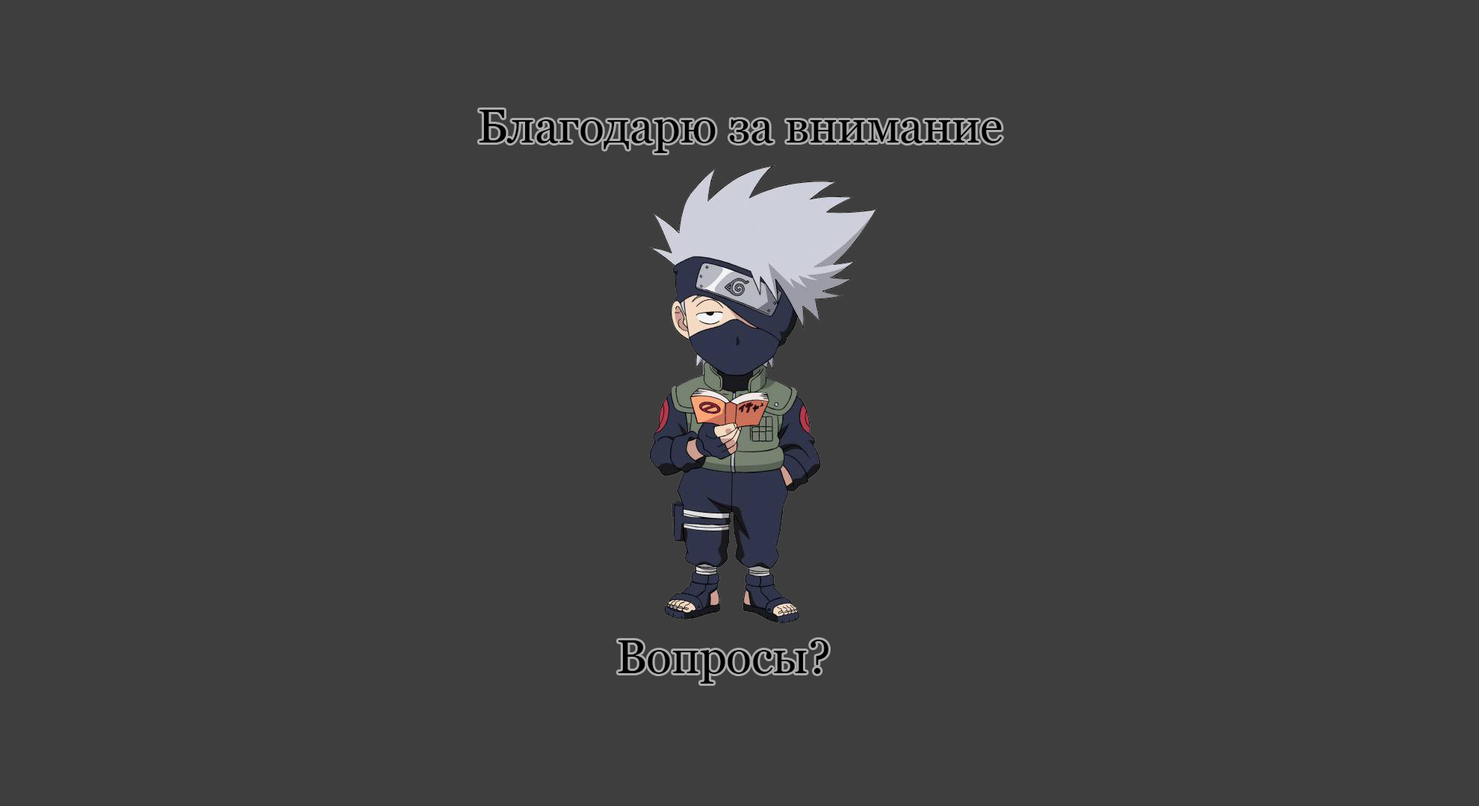
<style>
.page{position:relative;width:1479px;height:806px;background:#3e3e3e}
.page>*{position:absolute;margin:0}
.t1{font:46.7px "Georgia";color:#000000}
</style>
<div class="page">
<p class="t1" style="left:479px;top:110px;width:523px;height:43px">Благодарю за внимание</p>
<p class="t1" style="left:618px;top:640px;width:210px;height:44px">Вопросы?</p>
</div>
